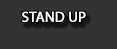
<style>
.page{position:relative;width:117px;height:49px;background:#333333}
.page>*{position:absolute;margin:0}
.t1{font:14.5px "MyriadPro-Regular";color:#ffffff;font-weight:bold}
</style>
<div class="page">
<p class="t1" style="left:22px;top:11px;width:64px;height:11px">STAND UP</p>
</div>
